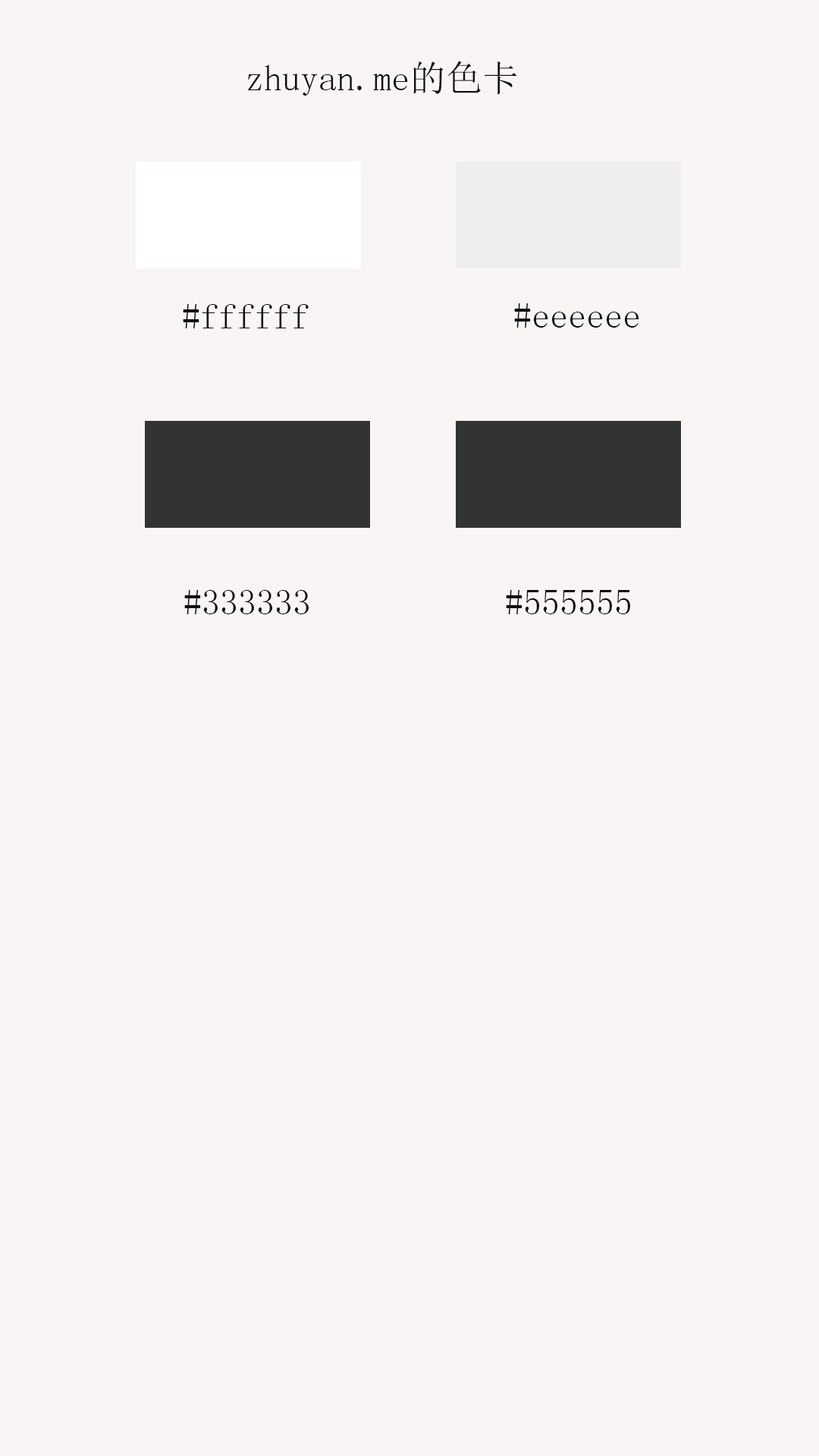
<style>
.page{position:relative;width:819px;height:1456px;background:#f9f5f5}
.page>*{position:absolute;margin:0}
.t1{font:36.4px "SimSun";color:#0e0d0d}
</style>
<div class="page">
<p class="t1" style="left:248px;top:61px;width:269px;height:35px">zhuyan.me的色卡</p>
<p class="t1" style="left:183px;top:304px;width:126px;height:24px">#ffffff</p>
<p class="t1" style="left:514px;top:303px;width:125px;height:25px">#eeeeee</p>
<p class="t1" style="left:184px;top:590px;width:125px;height:24px">#333333</p>
<p class="t1" style="left:506px;top:590px;width:124px;height:24px">#555555</p>
</div>
